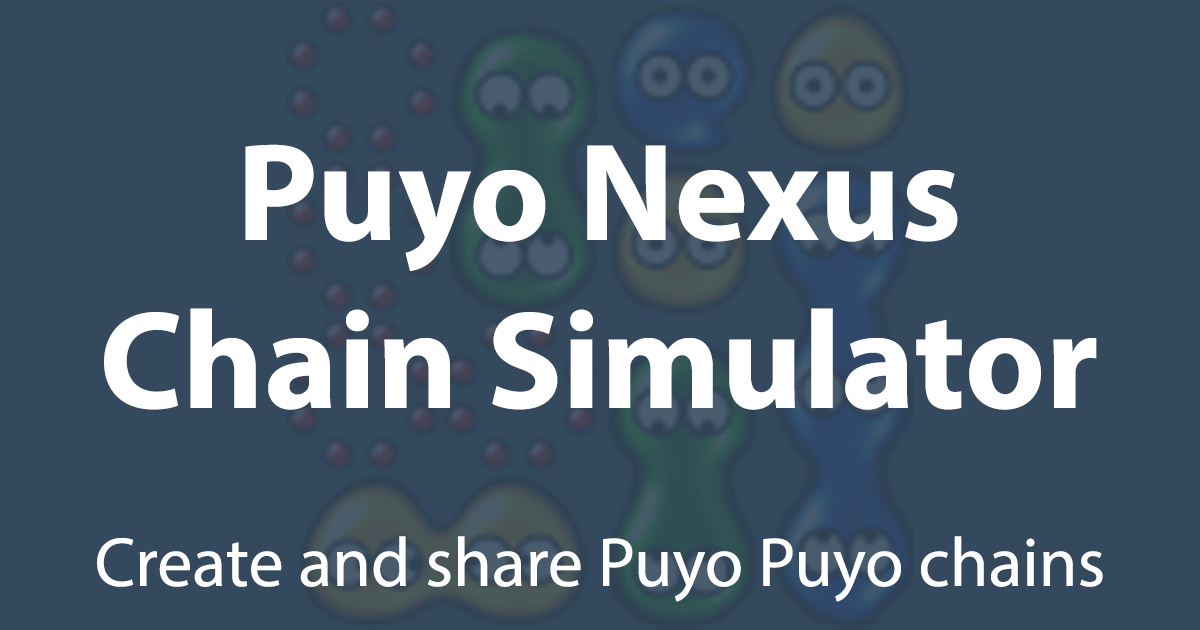
<style>
.page{position:relative;width:1200px;height:630px;background:#34495e}
.page>*{position:absolute;margin:0}
.t1{font:140px "MyriadPro-Bold";color:#ffffff}
.t2{font:70px "MyriadPro-Regular";color:#ffffff}
</style>
<div class="page">
<p class="t1" style="left:104px;top:144px;width:993px;height:266px;text-align:center">Puyo Nexus<br>Chain Simulator</p>
<p class="t2" style="left:97px;top:536px;width:1006px;height:66px">Create and share Puyo Puyo chains</p>
</div>
